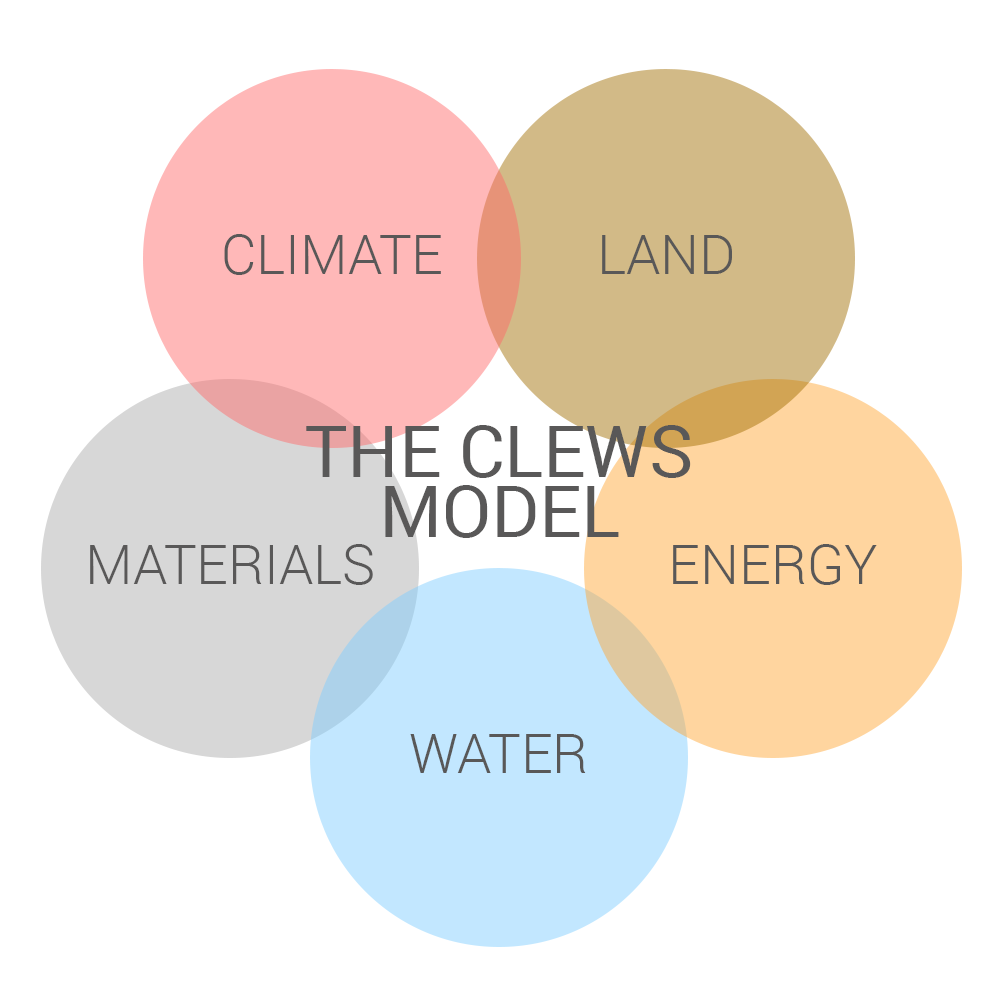
<style>
.page{position:relative;width:996px;height:996px;background:#ffffff}
.page>*{position:absolute;margin:0}
.t1{font:55px "Roboto-Light";color:#595858}
.t2{font:72px/60px "Roboto-Regular";color:#595858}
</style>
<div class="page">
<p class="t1" style="left:224px;top:234px;width:217px;height:41px">CLIMATE</p>
<p class="t1" style="left:602px;top:235px;width:130px;height:39px">LAND</p>
<p class="t2" style="left:306px;top:425px;width:385px;height:113px;text-align:center">THE CLEWS<br>MODEL</p>
<p class="t1" style="left:90px;top:544px;width:283px;height:41px">MATERIALS</p>
<p class="t1" style="left:673px;top:544px;width:204px;height:41px">ENERGY</p>
<p class="t1" style="left:410px;top:734px;width:176px;height:39px">WATER</p>
</div>
